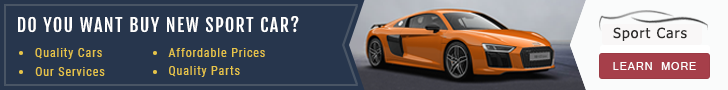
<style>
.page{position:relative;width:728px;height:90px;background:#27364d}
.page>*{position:absolute;margin:0}
.t1{font:18px "FjallaOne-Regular";letter-spacing:0.075em;color:#ffffff}
.t2{font:14px "Tahoma";letter-spacing:0.075em;color:#2e2d2c}
.t3{font:12px "RobotoCondensed-Regular";letter-spacing:0.075em;color:#e6c449}
.t4{font:12px "Latha";letter-spacing:0.075em;color:#ffffff}
</style>
<div class="page">
<p class="t1" style="left:18px;top:16px;width:281px;height:17px">DO YOU WANT BUY NEW SPORT CAR?</p>
<p class="t2" style="left:613px;top:27px;width:74px;height:14px">Sport Cars</p>
<p class="t3" style="left:35px;top:48px;width:67px;height:11px">Quality Cars</p>
<p class="t3" style="left:168px;top:48px;width:97px;height:9px">Affordable Prices</p>
<p class="t4" style="left:613px;top:62px;width:83px;height:8px">LEARN MORE</p>
<p class="t3" style="left:35px;top:67px;width:70px;height:9px">Our Services</p>
<p class="t3" style="left:169px;top:66px;width:71px;height:11px">Quality Parts</p>
</div>
